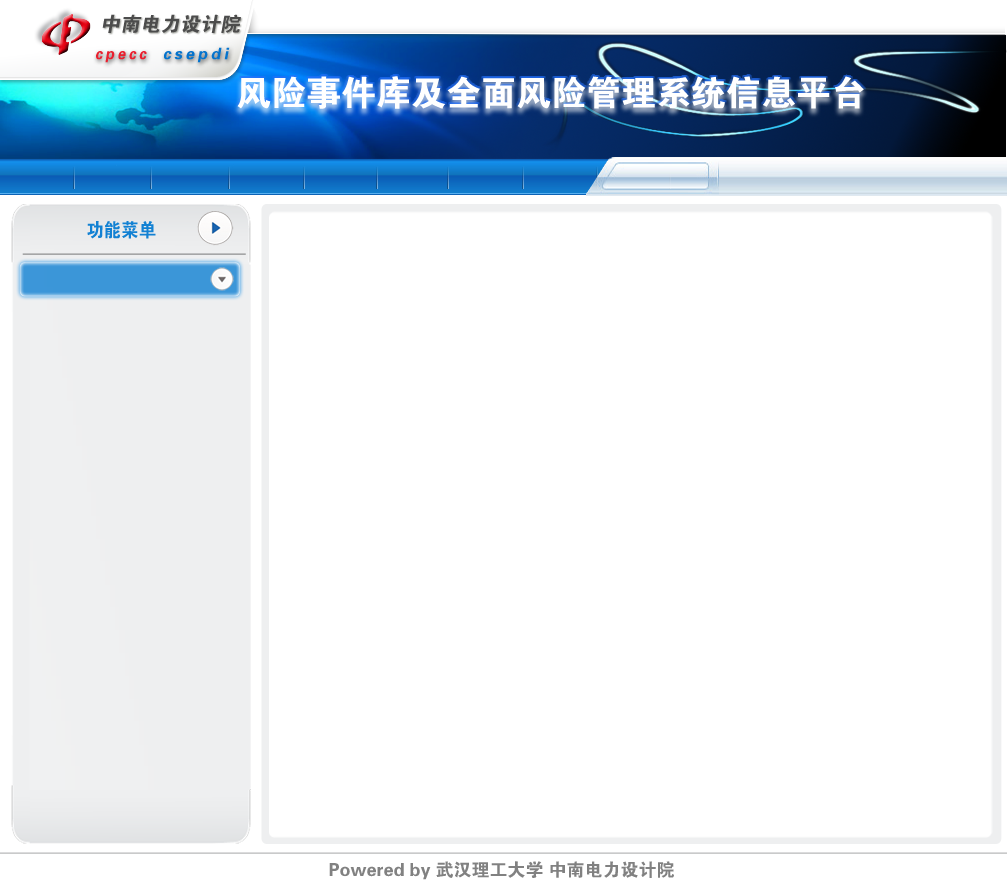
<style>
.page{position:relative;width:1007px;height:880px;background:#ffffff}
.page>*{position:absolute;margin:0}
.t1{font:35px "FZDHTJW--GB1-0";color:#ffffff}
.t2{font:19px "FZDHTJW--GB1-0";letter-spacing:0.01em;color:#1281d3;font-variant:small-caps;scale:0.93 1}
.t3{font:18px "FZDHTJW--GB1-0";color:#818181}
</style>
<div class="page">
<p class="t1" style="left:237px;top:76px;width:627px;height:33px">风险事件库及全面风险管理系统信息平台</p>
<p class="t2" style="left:87px;top:221px;width:69px;height:18px">功能菜单</p>
<p class="t3" style="left:329px;top:861px;width:345px;height:19px">Powered by 武汉理工大学 中南电力设计院</p>
</div>
